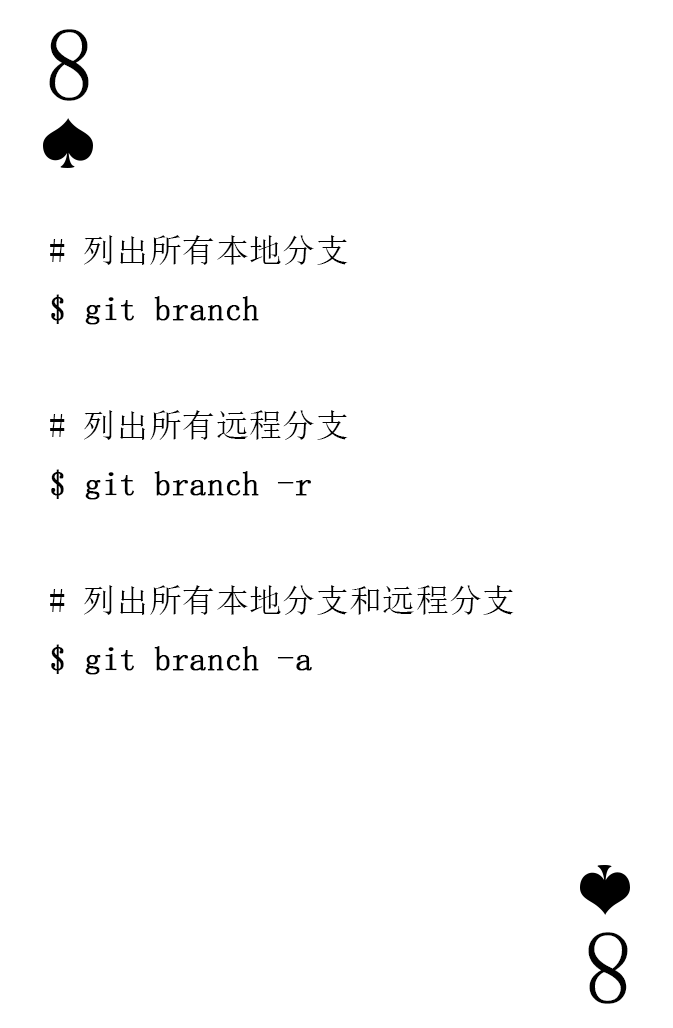
<style>
.page{position:relative;width:673px;height:1028px;background:#ffffff}
.page>*{position:absolute;margin:0}
.t1{font:104.2px "SimSun-ExtB";color:#010101;scale:0.93 1}
.t2{font:33.3px "SimSun";color:#000000;font-weight:bold}
.t3{font:33.3px "SimSun";color:#000000}
</style>
<div class="page">
<p class="t1" style="left:49px;top:29px;width:40px;height:72px">8</p>
<p class="t2" style="left:50px;top:235px;width:464px;height:440px"><span class="t3"># 列出所有本地分支<br></span>$ git branch<br><span class="t3"><br># 列出所有远程分支<br></span>$ git branch -r<br><span class="t3"><br># 列出所有本地分支和远程分支<br></span>$ git branch -a</p>
<p class="t1" style="left:588px;top:932px;width:40px;height:72px;rotate:180deg">8</p>
</div>
